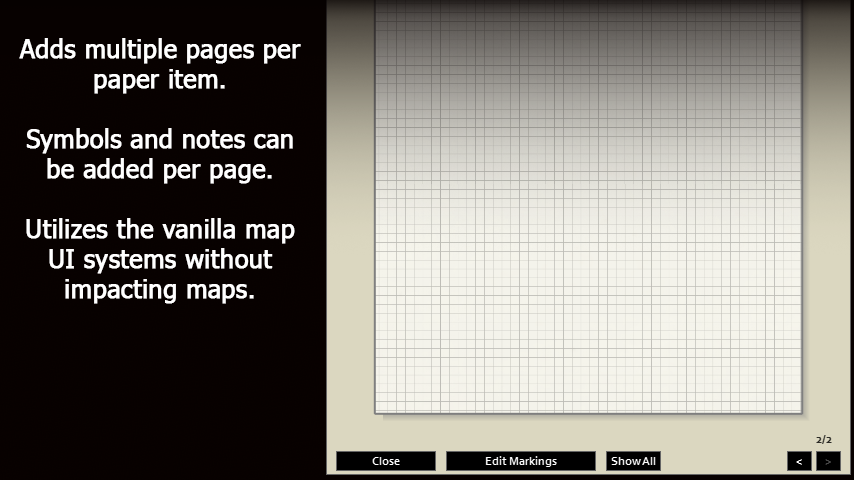
<style>
.page{position:relative;width:854px;height:480px}
.page>*{position:absolute;margin:0}
.t1{font:25px "Tahoma";color:#ffffff;font-weight:bold}
</style>
<div class="page">
<p class="t1" style="left:19px;top:38px;width:282px;height:266px;text-align:center">Adds multiple pages per paper item.<br><br>Symbols and notes can be added per page.<br><br>Utilizes the vanilla map UI systems without impacting maps.</p>
</div>
